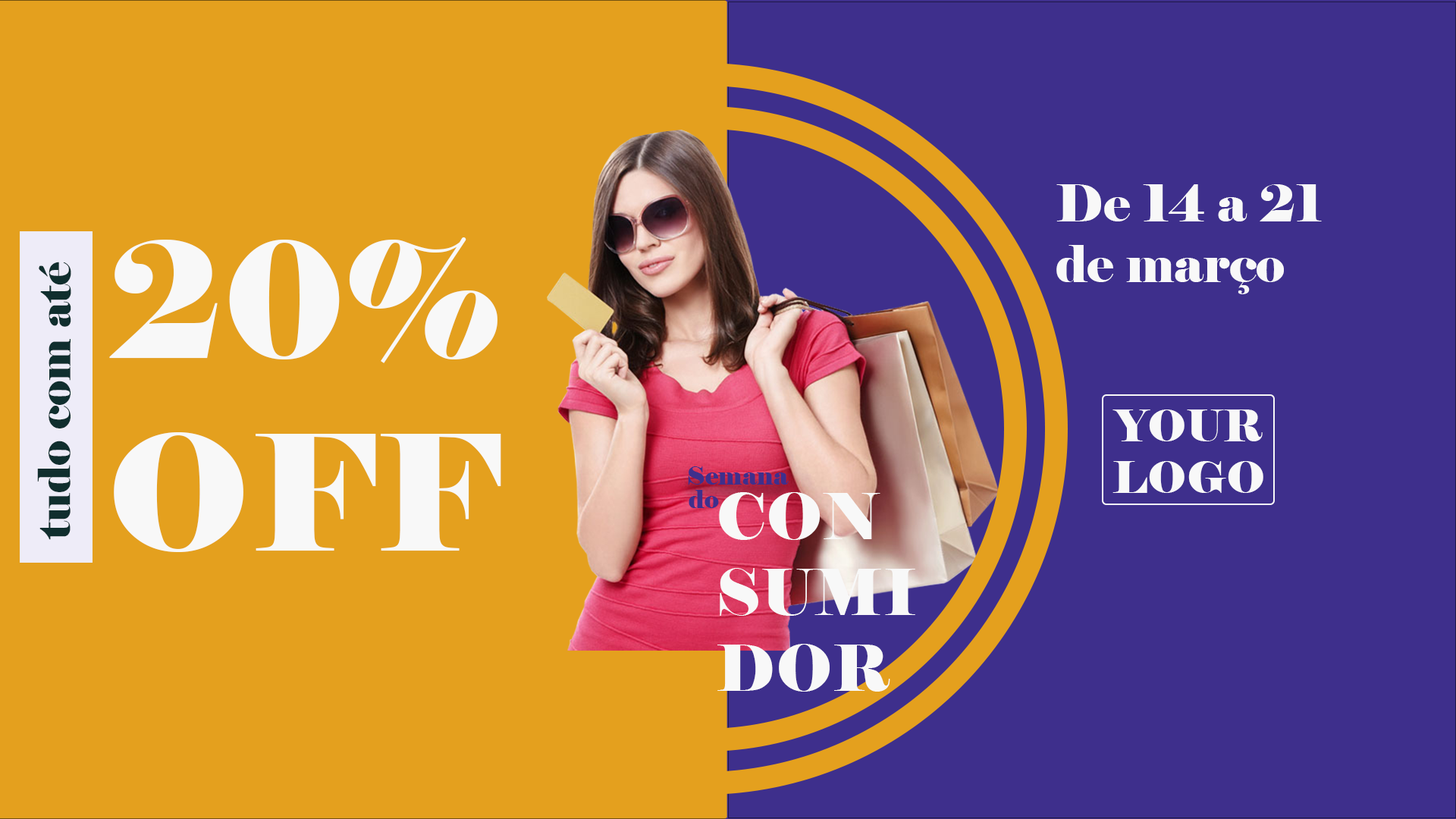
<style>
.page{position:relative;width:1456px;height:819px;background:#e4a01e}
.page>*{position:absolute;margin:0}
.t1{font:50.6px "Elephant-Regular";color:#f8f8f8}
.t2{font:160.1px "Elephant-Regular";color:#f8f8f8}
.t3{font:44.1px "Elephant-Regular";color:#102e2e}
.t4{font:43.2px "Elephant-Regular";color:#f8f8f8}
.t5{font:25.3px "Elephant-Regular";color:#3e2f8c}
.t6{font:63.2px "Elephant-Regular";color:#f8f8f8}
</style>
<div class="page">
<p class="t1" style="left:1056px;top:184px;width:266px;height:110px">De 14 a 21<br>de março</p>
<p class="t2" style="left:109px;top:237px;width:392px;height:315px;text-align:center">20%<br>OFF</p>
<p class="t3" style="left:37px;top:262px;width:34px;height:278px;rotate:-90deg">tudo com até</p>
<p class="t4" style="left:1112px;top:409px;width:151px;height:84px;text-align:center">YOUR<br>LOGO</p>
<p class="t5" style="left:688px;top:466px;width:101px;height:19px">Semana</p>
<p class="t5" style="left:689px;top:490px;width:30px;height:18px">do</p>
<p class="t6" style="left:717px;top:492px;width:198px;height:200px">CON<br>SUMI<br>DOR</p>
</div>
